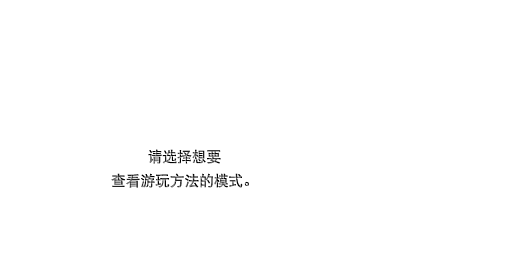
<style>
.page{position:relative;width:512px;height:256px;background:#ffffff}
.page>*{position:absolute;margin:0}
.t1{font:14.7px/24px "DFPHeiW5-GB"}
</style>
<div class="page">
<p class="t1" style="left:111px;top:149px;width:138px;height:39px;text-align:center">请选择想要<br>查看游玩方法的模式。</p>
</div>
